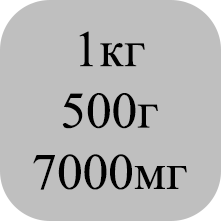
<style>
.page{position:relative;width:221px;height:221px;background:#bfbfbf}
.page>*{position:absolute;margin:0}
.t1{font:51.1px "TimesNewRomanPSMT";color:#000000}
</style>
<div class="page">
<p class="t1" style="left:33px;top:31px;width:154px;height:159px;text-align:center">1кг<br>500г<br>7000мг</p>
</div>
